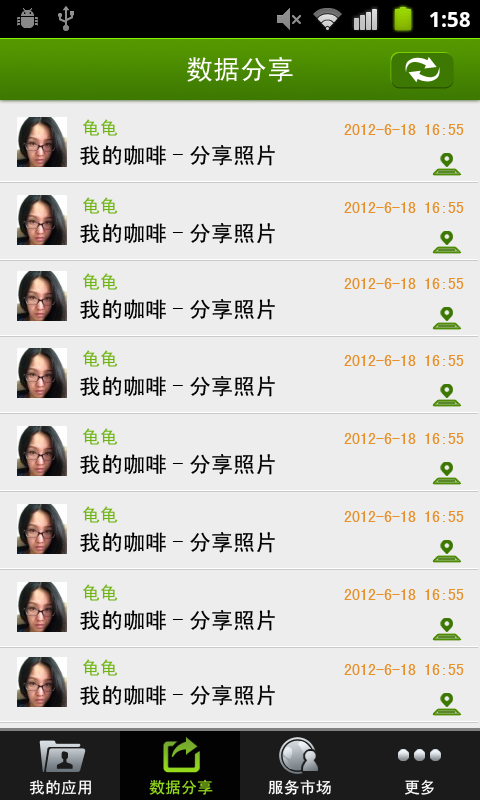
<style>
.page{position:relative;width:480px;height:800px;background:#eeeded}
.page>*{position:absolute;margin:0}
.t1{font:27px "SimHei";color:#ffffff}
.t2{font:18px "SimHei";color:#6eb513}
.t3{font:16px "SimHei";color:#e7912b}
.t4{font:22px "SimHei";color:#000000}
.t5{font:16px "SimHei";color:#ffffff}
.t6{font:16px "SimHei";color:#94db1c}
</style>
<div class="page">
<p class="t1" style="left:187px;top:56px;width:106px;height:26px">数据分享</p>
<p class="t2" style="left:83px;top:119px;width:35px;height:17px">龟龟</p>
<p class="t3" style="left:344px;top:124px;width:120px;height:11px">2012-6-18 16:55</p>
<p class="t4" style="left:80px;top:145px;width:195px;height:21px">我的咖啡-分享照片</p>
<p class="t2" style="left:83px;top:197px;width:35px;height:17px">龟龟</p>
<p class="t3" style="left:344px;top:202px;width:120px;height:11px">2012-6-18 16:55</p>
<p class="t4" style="left:80px;top:223px;width:195px;height:21px">我的咖啡-分享照片</p>
<p class="t2" style="left:83px;top:273px;width:35px;height:17px">龟龟</p>
<p class="t3" style="left:344px;top:278px;width:120px;height:11px">2012-6-18 16:55</p>
<p class="t4" style="left:80px;top:299px;width:195px;height:21px">我的咖啡-分享照片</p>
<p class="t2" style="left:83px;top:350px;width:35px;height:17px">龟龟</p>
<p class="t3" style="left:344px;top:355px;width:120px;height:11px">2012-6-18 16:55</p>
<p class="t4" style="left:80px;top:376px;width:195px;height:21px">我的咖啡-分享照片</p>
<p class="t2" style="left:83px;top:428px;width:35px;height:17px">龟龟</p>
<p class="t3" style="left:344px;top:433px;width:120px;height:11px">2012-6-18 16:55</p>
<p class="t4" style="left:80px;top:454px;width:195px;height:21px">我的咖啡-分享照片</p>
<p class="t2" style="left:83px;top:506px;width:35px;height:17px">龟龟</p>
<p class="t3" style="left:344px;top:511px;width:120px;height:11px">2012-6-18 16:55</p>
<p class="t4" style="left:80px;top:532px;width:195px;height:21px">我的咖啡-分享照片</p>
<p class="t2" style="left:83px;top:584px;width:35px;height:17px">龟龟</p>
<p class="t3" style="left:344px;top:589px;width:120px;height:11px">2012-6-18 16:55</p>
<p class="t4" style="left:80px;top:610px;width:195px;height:21px">我的咖啡-分享照片</p>
<p class="t2" style="left:83px;top:659px;width:35px;height:17px">龟龟</p>
<p class="t3" style="left:344px;top:664px;width:120px;height:11px">2012-6-18 16:55</p>
<p class="t4" style="left:80px;top:685px;width:195px;height:21px">我的咖啡-分享照片</p>
<p class="t5" style="left:29px;top:780px;width:62px;height:15px">我的应用</p>
<p class="t6" style="left:149px;top:779px;width:64px;height:16px">数据分享</p>
<p class="t5" style="left:268px;top:779px;width:63px;height:16px">服务市场</p>
<p class="t5" style="left:405px;top:779px;width:29px;height:16px">更多</p>
</div>
